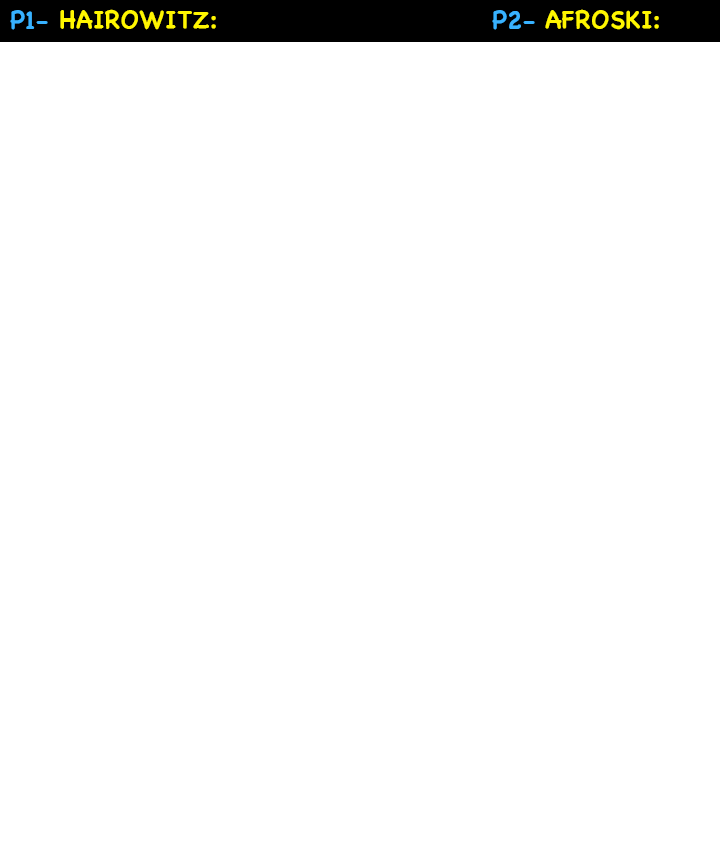
<style>
.page{position:relative;width:720px;height:860px;background:#ffffff}
.page>*{position:absolute;margin:0}
.t1{font:25px "Chalkboard-Bold";letter-spacing:0.01em;color:#fff600}
.t2{font:25px "Chalkboard-Bold";letter-spacing:0.01em;color:#38b2ff}
</style>
<div class="page">
<p class="t1" style="left:10px;top:9px;width:206px;height:21px"><span class="t2">P1- </span>HAIROWITZ:</p>
<p class="t1" style="left:492px;top:9px;width:167px;height:21px"><span class="t2">P2- </span>AFROSKI:</p>
</div>
